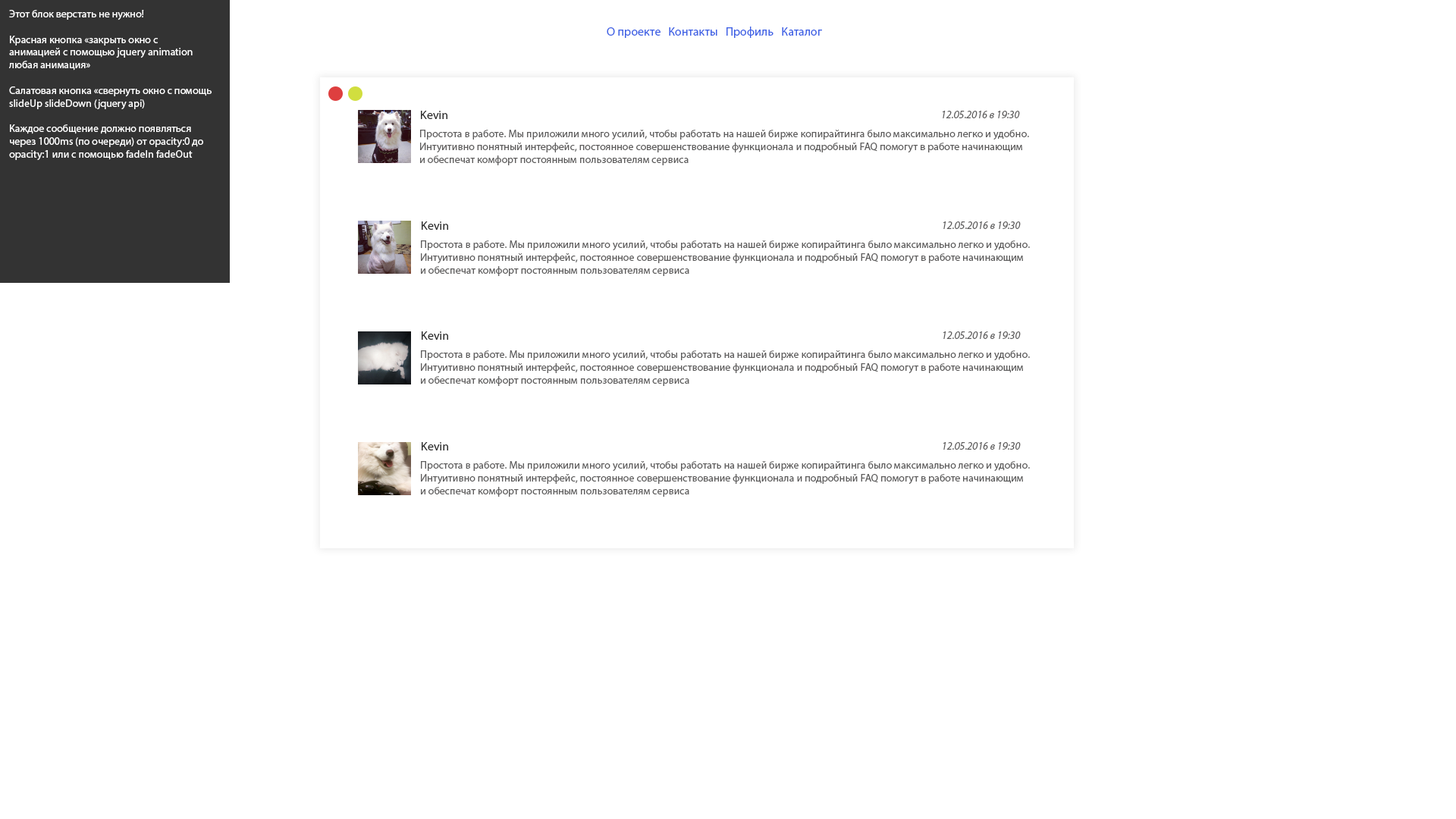
<style>
.page{position:relative;width:1456px;height:819px;background:#ffffff}
.page>*{position:absolute;margin:0}
.t1{font:10.6px "MyriadPro-Regular";color:#ffffff}
.t2{font:12.1px "MyriadPro-Regular";color:#3f62e5}
.t3{font:12.1px "MyriadPro-Regular";color:#2d2d2d}
.t4{font:10.6px "MyriadPro-It";color:#5e5d5d}
.t5{font:10.6px "MyriadPro-Regular";color:#5e5d5d}
</style>
<div class="page">
<p class="t1" style="left:9px;top:10px;width:203px;height:150px">Этот блок верстать не нужно!<br><br>Красная кнопка «закрыть окно с<br>анимацией с помощью jquery animation<br>любая анимация»<br><br>Салатовая кнопка «свернуть окно с помощь<br>slideUp slideDown (jquery api)<br><br>Каждое сообщение должно появляться<br>через 1000ms (по очереди) от opacity:0 до <br>opacity:1 или с помощью fadeIn fadeOut</p>
<p class="t2" style="left:607px;top:27px;width:215px;height:11px">О проекте   Контакты   Профиль   Каталог</p>
<p class="t3" style="left:421px;top:111px;width:26px;height:8px">Kevin</p>
<p class="t4" style="left:943px;top:111px;width:77px;height:7px">12.05.2016 в 19:30</p>
<p class="t5" style="left:420px;top:130px;width:609px;height:35px">Простота в работе. Мы приложили много усилий, чтобы работать на нашей бирже копирайтинга было максимально легко и удобно.<br>Интуитивно понятный интерфейс, постоянное совершенствование функционала и подробный FAQ помогут в работе начинающим <br>и обеспечат комфорт постоянным пользователям сервиса</p>
<p class="t3" style="left:422px;top:221px;width:26px;height:9px">Kevin</p>
<p class="t4" style="left:943px;top:221px;width:78px;height:8px">12.05.2016 в 19:30</p>
<p class="t5" style="left:421px;top:240px;width:609px;height:36px">Простота в работе. Мы приложили много усилий, чтобы работать на нашей бирже копирайтинга было максимально легко и удобно.<br>Интуитивно понятный интерфейс, постоянное совершенствование функционала и подробный FAQ помогут в работе начинающим <br>и обеспечат комфорт постоянным пользователям сервиса</p>
<p class="t3" style="left:422px;top:331px;width:26px;height:9px">Kevin</p>
<p class="t4" style="left:943px;top:331px;width:78px;height:8px">12.05.2016 в 19:30</p>
<p class="t5" style="left:421px;top:350px;width:609px;height:36px">Простота в работе. Мы приложили много усилий, чтобы работать на нашей бирже копирайтинга было максимально легко и удобно.<br>Интуитивно понятный интерфейс, постоянное совершенствование функционала и подробный FAQ помогут в работе начинающим <br>и обеспечат комфорт постоянным пользователям сервиса</p>
<p class="t3" style="left:422px;top:442px;width:26px;height:8px">Kevin</p>
<p class="t4" style="left:943px;top:442px;width:78px;height:8px">12.05.2016 в 19:30</p>
<p class="t5" style="left:421px;top:461px;width:609px;height:36px">Простота в работе. Мы приложили много усилий, чтобы работать на нашей бирже копирайтинга было максимально легко и удобно.<br>Интуитивно понятный интерфейс, постоянное совершенствование функционала и подробный FAQ помогут в работе начинающим <br>и обеспечат комфорт постоянным пользователям сервиса</p>
</div>
